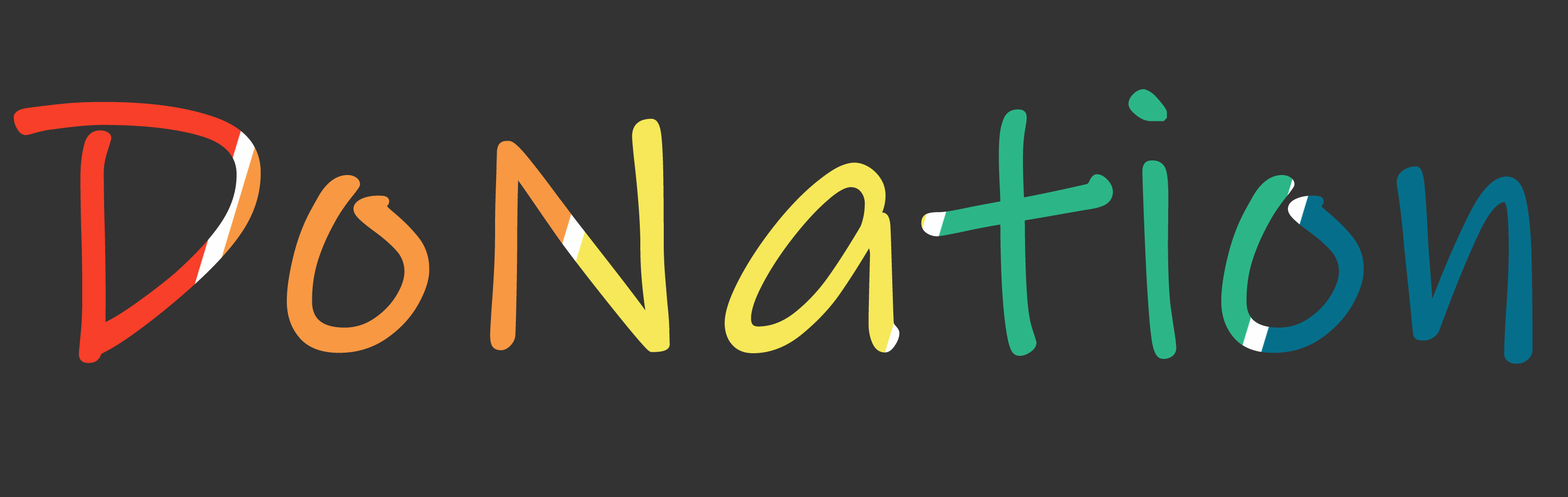
<style>
.page{position:relative;width:1568px;height:497px;background:#333333}
.page>*{position:absolute;margin:0}
.t1{font:374.6px "InkFree";font-weight:bold}
</style>
<div class="page">
<p class="t1" style="left:14px;top:89px;width:1519px;height:275px">DoNation</p>
</div>
